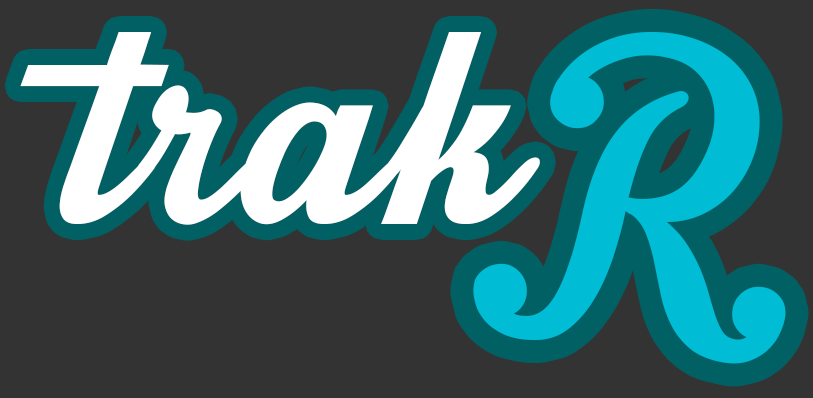
<style>
.page{position:relative;width:813px;height:398px;background:#333333}
.page>*{position:absolute;margin:0}
.t1{font:450px "IntriqueScriptPersonalUse";color:#ffffff}
.t2{font:408px "IntriqueScriptPersonalUse";color:#00bcd4}
</style>
<div class="page">
<p class="t1" style="left:20px;top:32px;width:520px;height:193px">trak</p>
<p class="t2" style="left:473px;top:32px;width:313px;height:332px">R</p>
</div>
